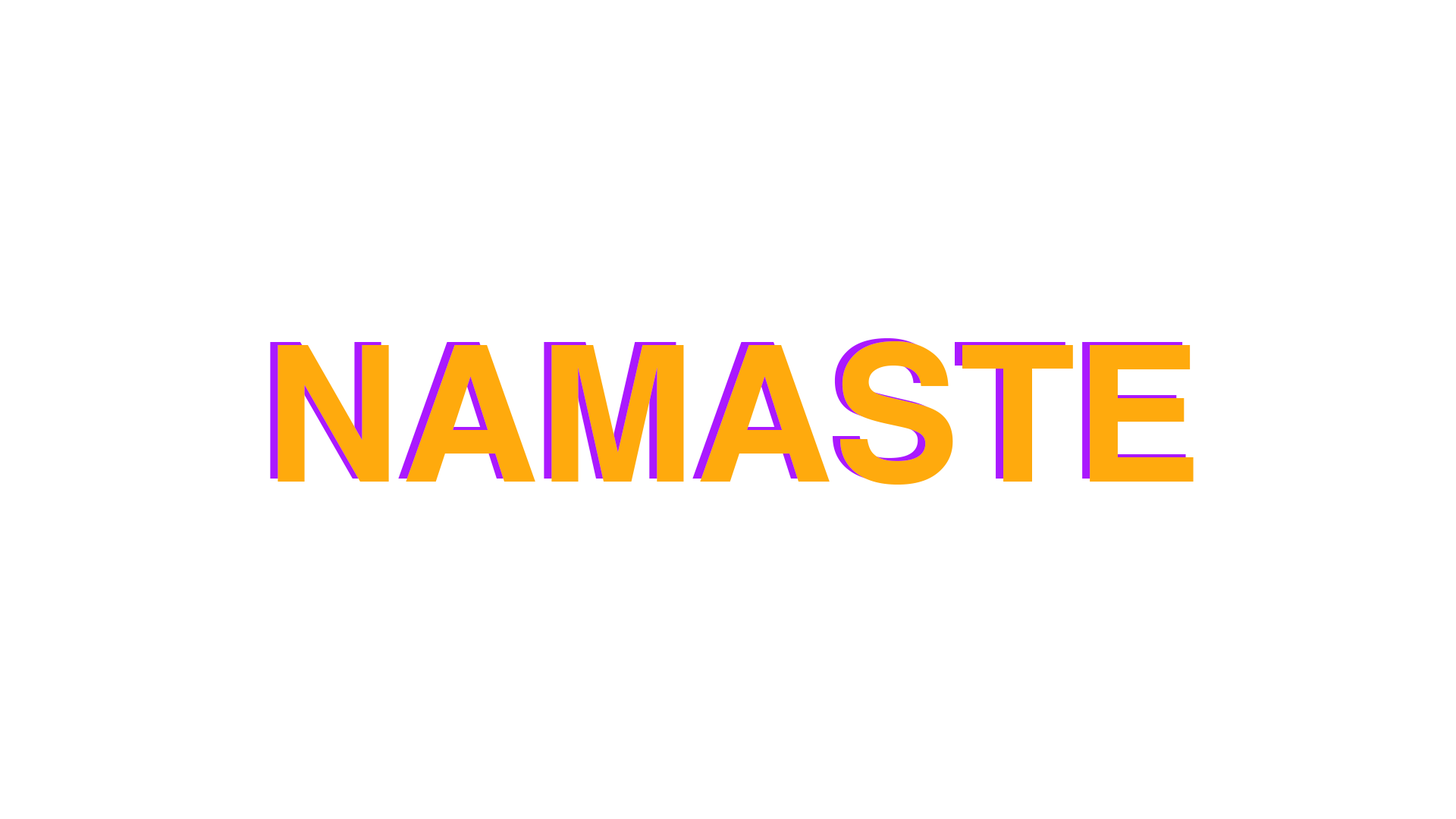
<style>
.page{position:relative;width:1456px;height:819px;background:#ffffff}
.page>*{position:absolute;margin:0}
.t1{font:189.6px "Helvetica-Bold";color:#ffaa0d}
</style>
<div class="page">
<p class="t1" style="left:270px;top:338px;width:916px;height:144px">NAMASTE</p>
<p class="t1" style="left:278px;top:341px;width:916px;height:144px">NAMASTE</p>
</div>
